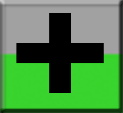
<style>
.page{position:relative;width:123px;height:113px;background:#a1a1a1}
.page>*{position:absolute;margin:0}
.t1{font:163.5px "Arial-BoldMT";color:#000000;scale:1.07 1}
</style>
<div class="page">
<p class="t1" style="left:16px;top:13px;width:88px;height:80px">+</p>
</div>
